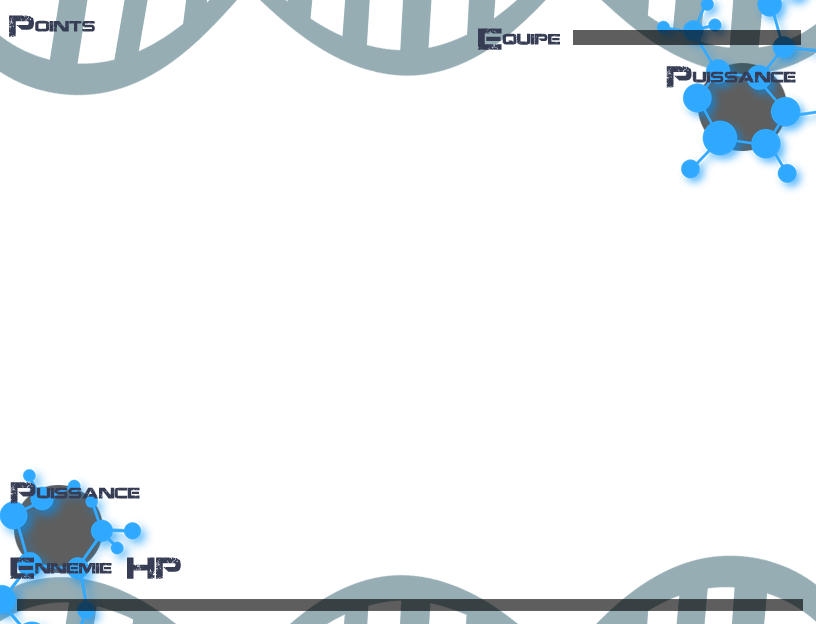
<style>
.page{position:relative;width:816px;height:624px;background:#ffffff}
.page>*{position:absolute;margin:0}
.t1{font:30px "JacintoSans";color:#353c53}
</style>
<div class="page">
<p class="t1" style="left:9px;top:15px;width:86px;height:22px">Points</p>
<p class="t1" style="left:478px;top:28px;width:82px;height:22px">Equipe</p>
<p class="t1" style="left:666px;top:66px;width:130px;height:22px">Puissance</p>
<p class="t1" style="left:10px;top:482px;width:130px;height:22px">Puissance</p>
<p class="t1" style="left:10px;top:557px;width:171px;height:22px">Ennemie HP</p>
</div>
